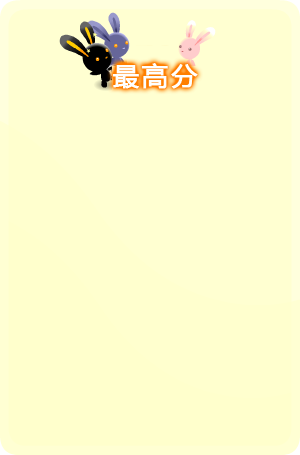
<style>
.page{position:relative;width:300px;height:455px;background:#ffffd1}
.page>*{position:absolute;margin:0}
.t1{font:26px "MicrosoftYaHei";letter-spacing:0.1em;color:#ffffff;font-weight:bold}
</style>
<div class="page">
<p class="t1" style="left:112px;top:63px;width:86px;height:26px">最高分</p>
</div>
